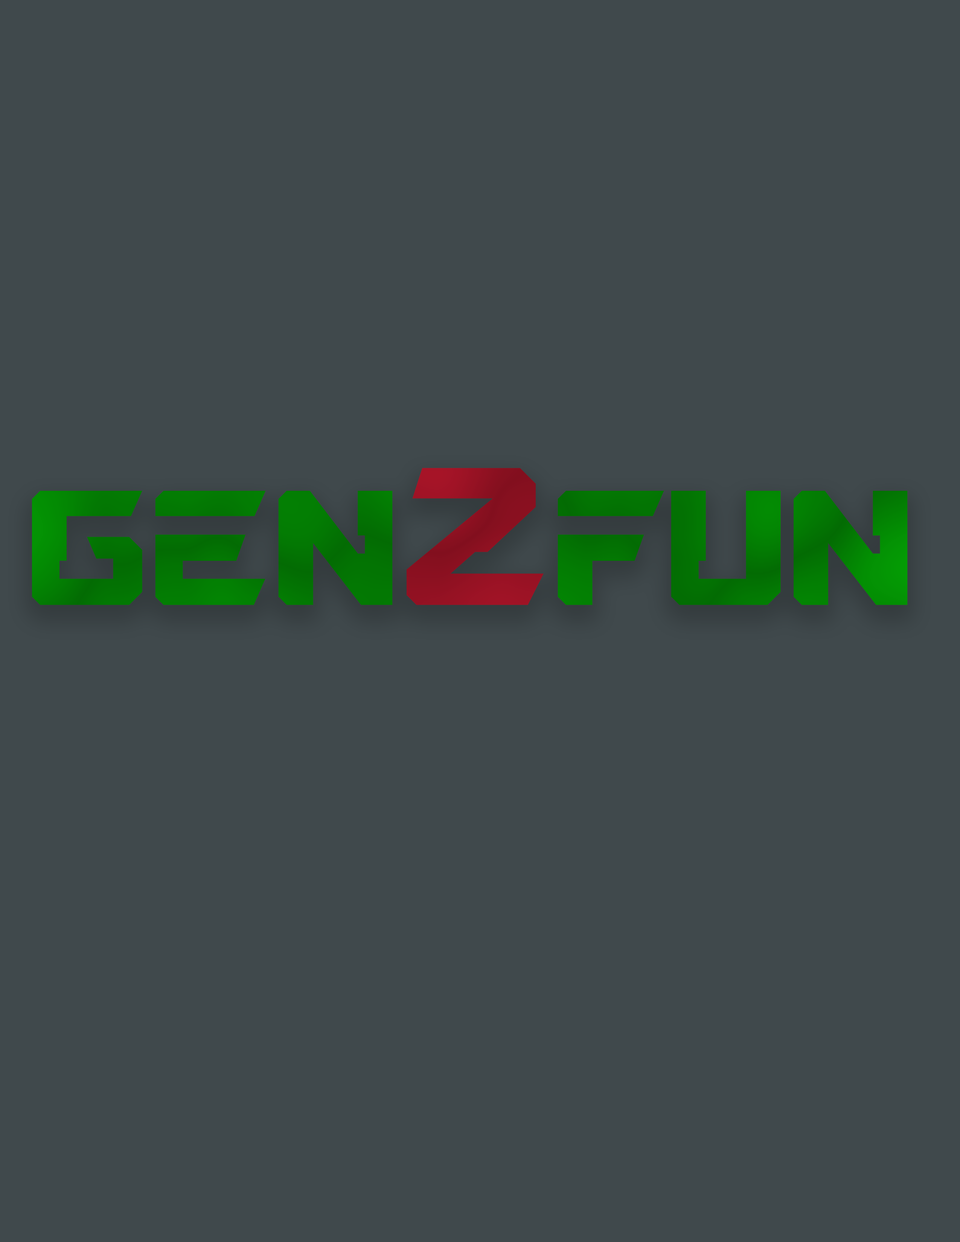
<style>
.page{position:relative;width:960px;height:1242px;background:#40494c}
.page>*{position:absolute;margin:0}
.t1{font:162.9px "Mechanismo-Regular";color:#037403}
.t2{font:195.5px "Mechanismo-Regular";color:#037403}
</style>
<div class="page">
<p class="t1" style="left:32px;top:468px;width:876px;height:137px">GEN<span class="t2">Z</span>FUN</p>
</div>
